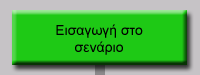
<style>
.page{position:relative;width:200px;height:75px;background:#1ec915}
.page>*{position:absolute;margin:0}
.t1{font:14px "ArialMT";color:#000000}
</style>
<div class="page">
<p class="t1" style="left:56px;top:24px;width:87px;height:31px;text-align:center">Εισαγωγή στο<br>σενάριο</p>
</div>
